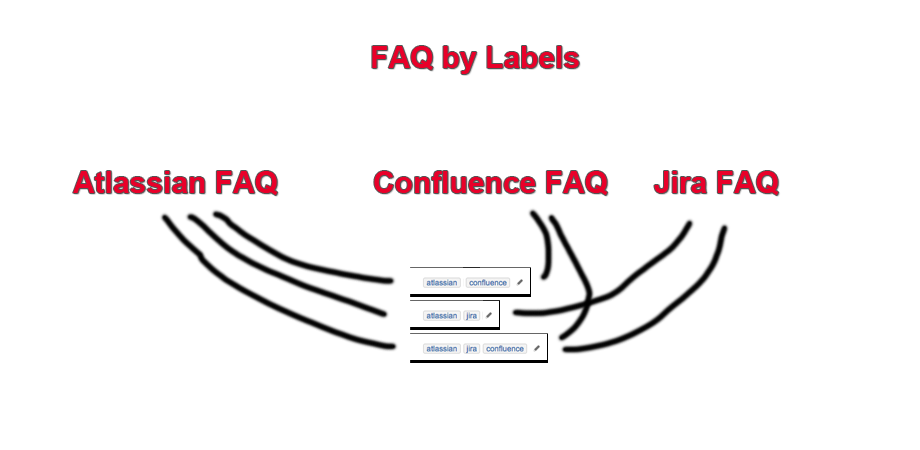
<style>
.page{position:relative;width:920px;height:450px;background:#ffffff}
.page>*{position:absolute;margin:0}
.t1{font:30px "Arial-BoldMT";color:#e90029}
</style>
<div class="page">
<p class="t1" style="left:372px;top:46px;width:207px;height:28px">FAQ by Labels</p>
<p class="t1" style="left:73px;top:171px;width:205px;height:24px">Atlassian FAQ</p>
<p class="t1" style="left:374px;top:171px;width:234px;height:24px">Confluence FAQ</p>
<p class="t1" style="left:654px;top:171px;width:125px;height:24px">Jira FAQ</p>
</div>
